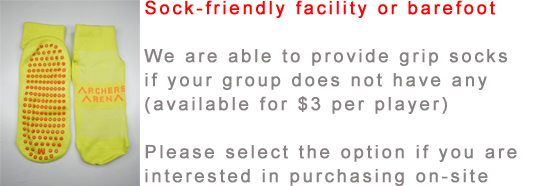
<style>
.page{position:relative;width:541px;height:186px;background:#ffffff}
.page>*{position:absolute;margin:0}
.t1{font:18px/24px "ArialMT";letter-spacing:0.14em;color:#888282;font-weight:bold}
.t2{font:18px/24px "ArialMT";letter-spacing:0.14em;color:#ff0000;font-weight:bold}
</style>
<div class="page">
<p class="t1" style="left:144px;top:0px;width:373px;height:186px"><span class="t2">Sock-friendly facility or barefoot<br></span><br>We are able to provide grip socks<br>if your group does not have any<br>(available for $3 per player)<br><br>Please select the option if you are<br>interested in purchasing on-site</p>
</div>
